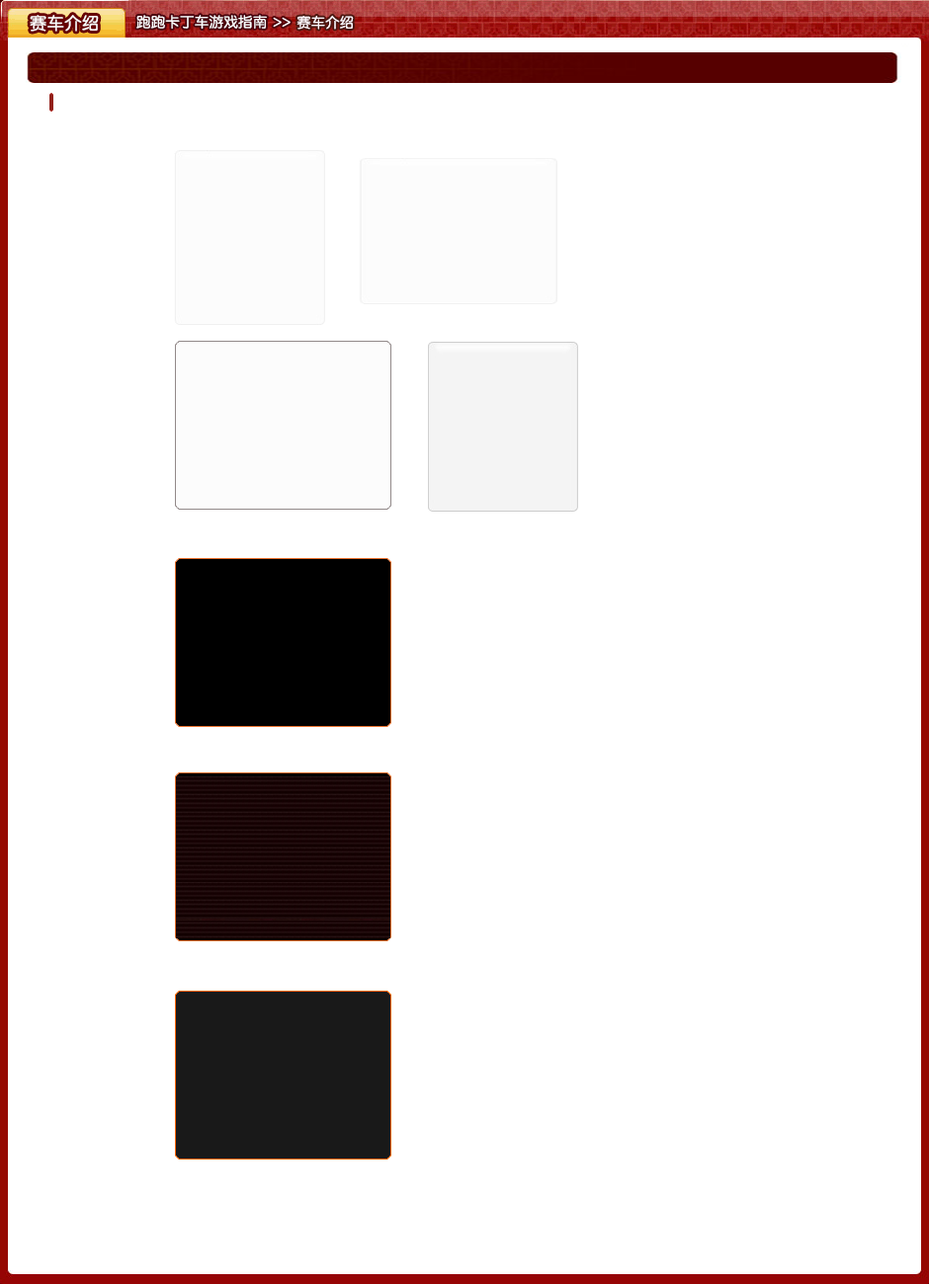
<style>
.page{position:relative;width:929px;height:1284px;background:#ffffff}
.page>*{position:absolute;margin:0}
.t1{font:17.4px "Tensentype-JiaLiZhongYuanJ";color:#fcfcfc}
.t2{font:14.6px "Tensentype-JiaLiZhongYuanJ";color:#fcfcfc}
.t3{font:16.3px "Tensentype-JiaLiZhongYuanJ";color:#fcf7fb;scale:0.76 1}
.t4{font:14.3px "Tensentype-JiaLiZhongYuanJ";color:#fcf6fa}
</style>
<div class="page">
<p class="t1" style="left:30px;top:15px;width:69px;height:17px">赛车介绍</p>
<p class="t2" style="left:136px;top:15px;width:131px;height:14px">跑跑卡丁车游戏指南</p>
<p class="t3" style="left:273px;top:17px;width:9px;height:11px">&gt;</p>
<p class="t3" style="left:282px;top:17px;width:8px;height:11px">&gt;</p>
<p class="t4" style="left:296px;top:15px;width:58px;height:15px">赛车介绍</p>
</div>
